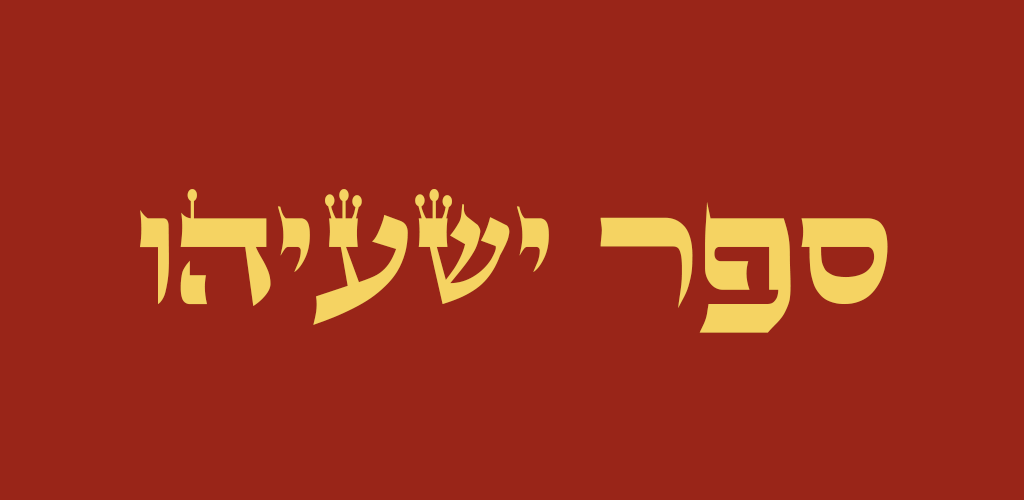
<style>
.page{position:relative;width:1024px;height:500px;background:#992518}
.page>*{position:absolute;margin:0}
.t1{font:166.7px "StamAshkenazCLM";color:#f5d362}
</style>
<div class="page">
<p class="t1" style="left:140px;top:189px;width:748px;height:144px">והיעשי רפס</p>
</div>
